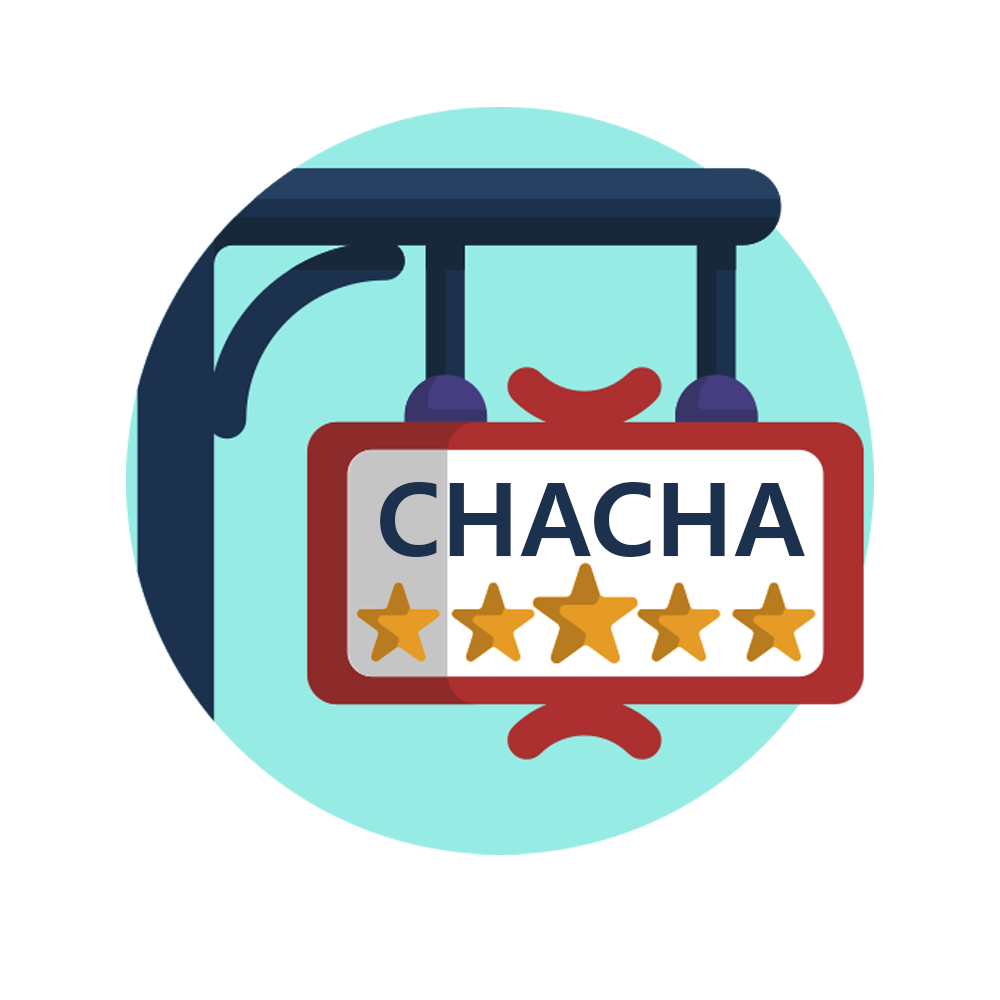
<style>
.page{position:relative;width:1000px;height:1000px;background:#ffffff}
.page>*{position:absolute;margin:0}
.t1{font:102.2px "MalgunGothicBold";color:#1c314e;text-transform:uppercase}
</style>
<div class="page">
<p class="t1" style="left:380px;top:482px;width:425px;height:75px">Chacha</p>
</div>
